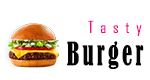
<style>
.page{position:relative;width:150px;height:80px;background:#ffffff}
.page>*{position:absolute;margin:0}
.t1{font:16px "AgencyFB-Reg";letter-spacing:0.42em;color:#f60a84}
.t2{font:30px "BernardMT-Condensed";letter-spacing:0.14em;color:#050505;scale:0.76 1}
</style>
<div class="page">
<p class="t1" style="left:88px;top:20px;width:54px;height:16px">Tasty</p>
<p class="t2" style="left:67px;top:41px;width:77px;height:28px">Burger</p>
</div>
